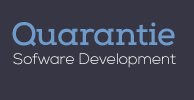
<style>
.page{position:relative;width:194px;height:100px;background:#373645}
.page>*{position:absolute;margin:0}
.t1{font:32.1px "NexaSlabBoldFREE";letter-spacing:-0.02em;color:#6e9bca}
.t2{font:15.4px "NexaLight";letter-spacing:-0.02em;color:#ffffff;scale:1.04 1}
</style>
<div class="page">
<p class="t1" style="left:12px;top:22px;width:163px;height:25px">Quarantie</p>
<p class="t2" style="left:13px;top:53px;width:163px;height:15px">Sofware Development</p>
</div>
